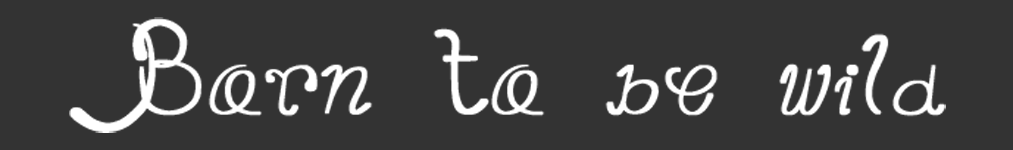
<style>
.page{position:relative;width:1013px;height:150px;background:#333333}
.page>*{position:absolute;margin:0}
.t1{font:112.1px "Single";color:#ffffff;font-weight:bold}
</style>
<div class="page">
<p class="t1" style="left:69px;top:17px;width:877px;height:116px">Born to be wild</p>
</div>
